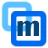
<style>
.page{position:relative;width:48px;height:48px;background:#ffffff}
.page>*{position:absolute;margin:0}
.t1{font:30px "BritannicBold";color:#044476}
</style>
<div class="page">
<p class="t1" style="left:17px;top:20px;width:22px;height:16px">m</p>
</div>
